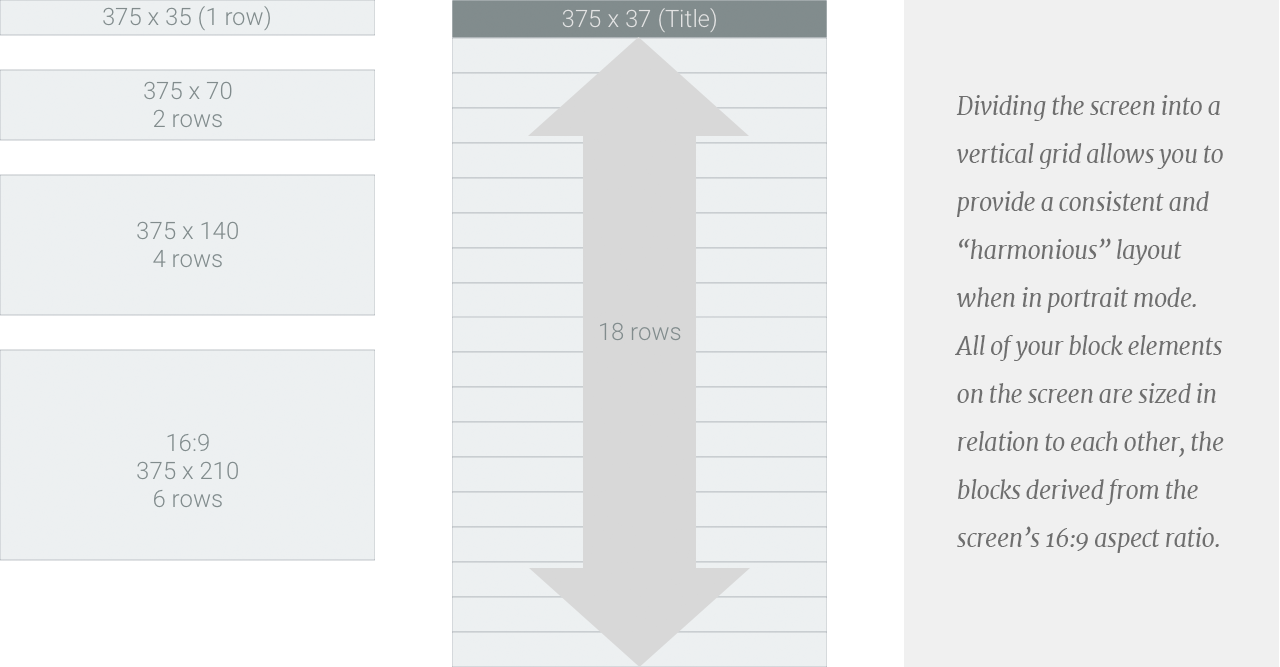
<style>
.page{position:relative;width:1280px;height:667px;background:#f0f0f0}
.page>*{position:absolute;margin:0}
.t1{font:24px/48px "Merriweather-Italic";letter-spacing:-0.025em;color:#6f6f6f}
</style>
<div class="page">
<p class="t1" style="left:955px;top:95px;width:269px;height:458px">Dividing the screen into a vertical grid allows you to provide a consistent and “harmonious” layout when in portrait mode. All of your block elements on the screen are sized in relation to each other, the blocks derived from the screen’s 16:9 aspect ratio.</p>
</div>
